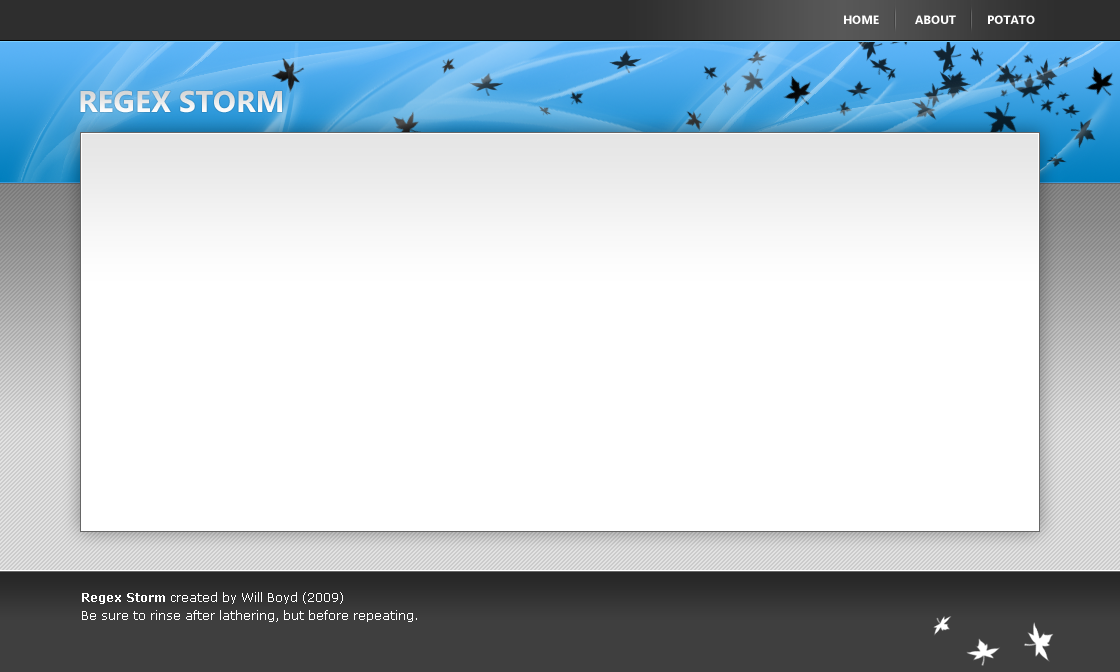
<style>
.page{position:relative;width:1120px;height:672px;background:#ffffff}
.page>*{position:absolute;margin:0}
.t1{font:12px "Ebrima-Bold";color:#ffffff;text-transform:uppercase}
.t2{font:30px "Ebrima-Bold";color:#e9e9e9;text-transform:uppercase}
.t3{font:12px/18px "Verdana";color:#ffffff}
.t4{font:12px/18px "Verdana-Bold";color:#ffffff;text-transform:uppercase}
.t5{font:12px/18px "Verdana-Bold";color:#ffffff}
</style>
<div class="page">
<p class="t1" style="left:844px;top:15px;width:191px;height:9px">Home About Potato</p>
<p class="t2" style="left:80px;top:90px;width:202px;height:23px">Regex Storm</p>
<p class="t3" style="left:82px;top:592px;width:335px;height:30px"><span class="t4">R</span><span class="t5">egex Storm</span> created by Will Boyd (2009)<br>Be sure to rinse after lathering, but before repeating.</p>
</div>
